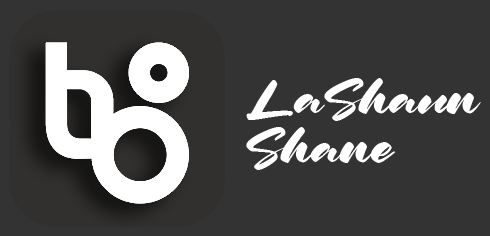
<style>
.page{position:relative;width:490px;height:236px;background:#333333}
.page>*{position:absolute;margin:0}
.t1{font:58.4px/49px "Astral-Studio";color:#ffffff;scale:1.28 1}
</style>
<div class="page">
<p class="t1" style="left:246px;top:78px;width:235px;height:92px">LaShaun<br>Shane</p>
</div>
